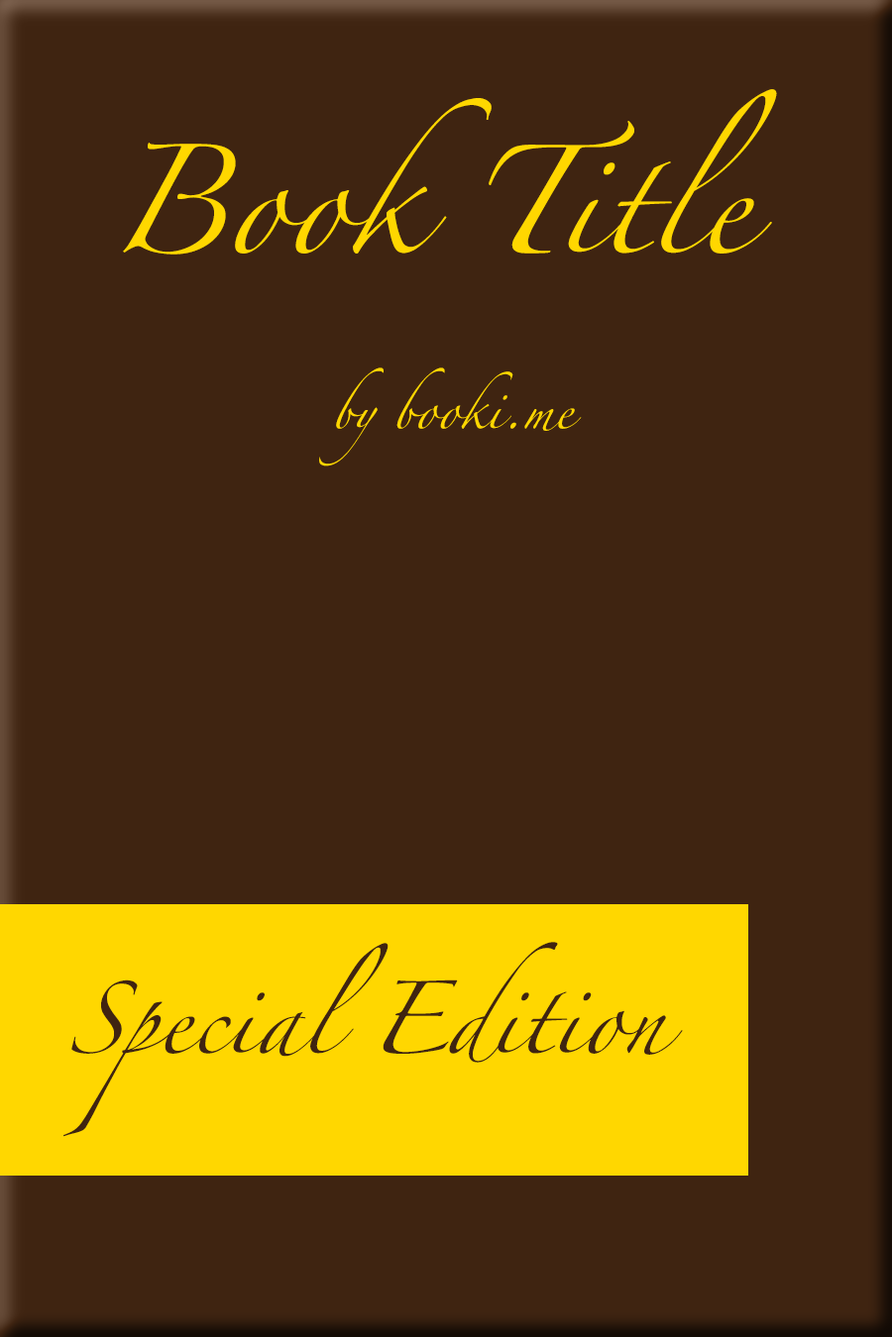
<style>
.page{position:relative;width:892px;height:1337px;background:#3f2411}
.page>*{position:absolute;margin:0}
.t1{font:97.1px "Zapfino";color:#ffd700}
.t2{font:35.7px "Zapfino";color:#ffd700}
.t3{font:65.4px "Zapfino";color:#3f2411}
</style>
<div class="page">
<p class="t1" style="left:123px;top:89px;width:654px;height:166px">Book Title</p>
<p class="t2" style="left:319px;top:368px;width:263px;height:99px">by booki.me</p>
<p class="t3" style="left:63px;top:942px;width:620px;height:195px">Special Edition</p>
</div>
